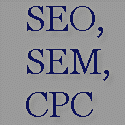
<style>
.page{position:relative;width:125px;height:125px;background:#9c9c9c}
.page>*{position:absolute;margin:0}
.t1{font:36px "Georgia";color:#0e1469}
</style>
<div class="page">
<p class="t1" style="left:26px;top:6px;width:83px;height:111px">SEO,<br>SEM,<br>CPC</p>
</div>
